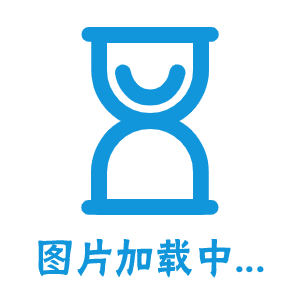
<style>
.page{position:relative;width:300px;height:300px;background:#ffffff}
.page>*{position:absolute;margin:0}
.t1{font:40px "FZYHJW--GB1-0";color:#1296db}
</style>
<div class="page">
<p class="t1" style="left:38px;top:238px;width:226px;height:40px">图片加载中...</p>
</div>
